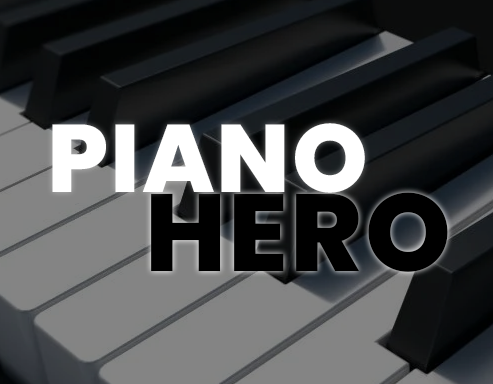
<style>
.page{position:relative;width:493px;height:384px}
.page>*{position:absolute;margin:0}
.t1{font:95.9px "Poppins-ExtraBold";letter-spacing:0.02em;color:#ffffff}
.t2{font:109.5px "Poppins-ExtraBold";letter-spacing:0.02em;color:#000000}
</style>
<div class="page">
<p class="t1" style="left:52px;top:123px;width:313px;height:70px">PIANO</p>
<p class="t2" style="left:151px;top:192px;width:297px;height:80px">HERO</p>
</div>
